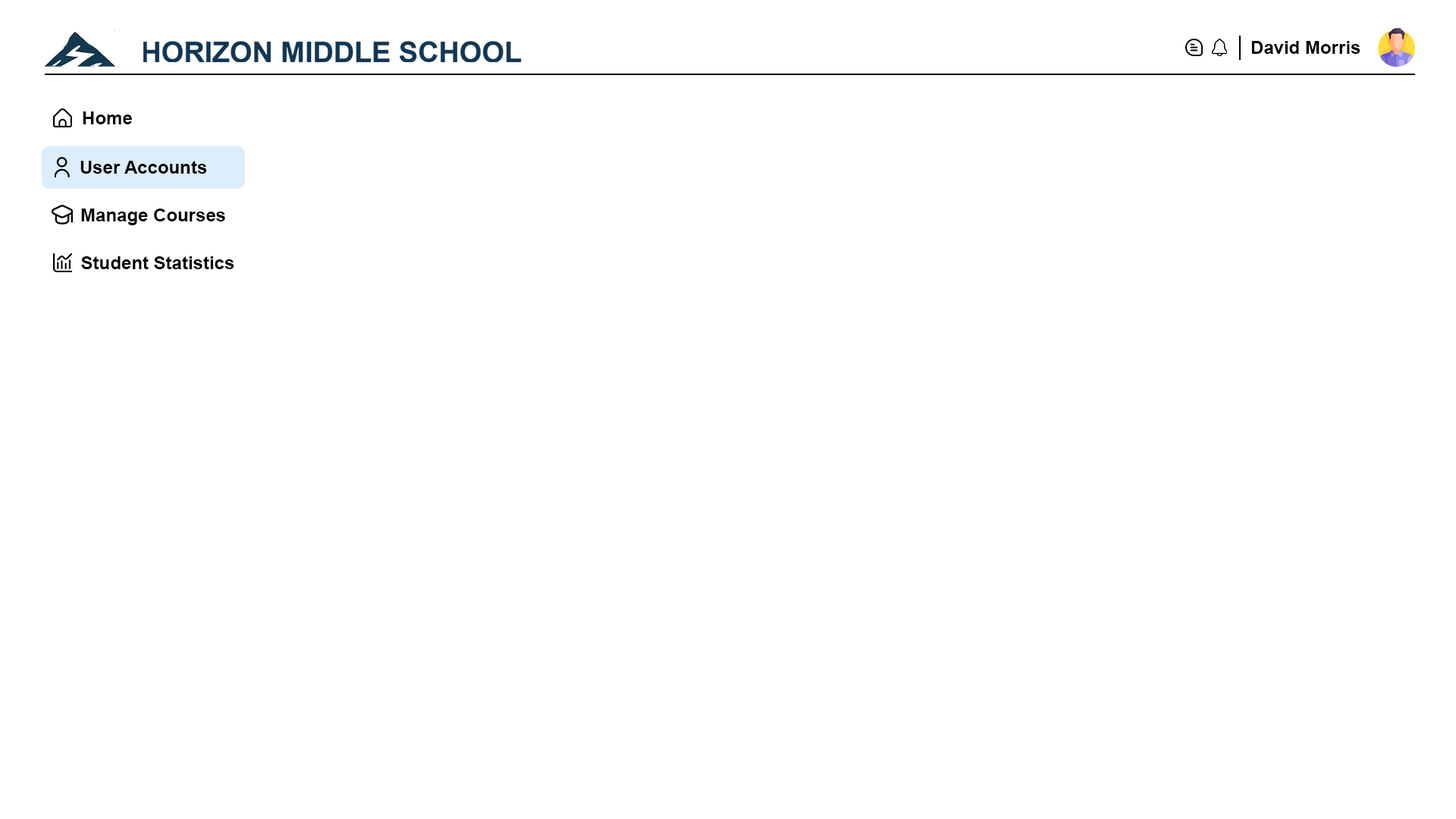
<style>
.page{position:relative;width:1456px;height:819px;background:#ffffff}
.page>*{position:absolute;margin:0}
.t1{font:18.2px "Arial-BoldMT";color:#000000}
.t2{font:18.2px "Arial-BoldMT";color:#010000}
</style>
<div class="page">
<p class="t1" style="left:1251px;top:41px;width:109px;height:13px">David Morris</p>
<p class="t1" style="left:83px;top:111px;width:49px;height:13px">Home</p>
<p class="t2" style="left:80px;top:161px;width:127px;height:13px">User Accounts</p>
<p class="t1" style="left:81px;top:209px;width:144px;height:16px">Manage Courses</p>
<p class="t1" style="left:81px;top:256px;width:153px;height:13px">Student Statistics</p>
</div>
